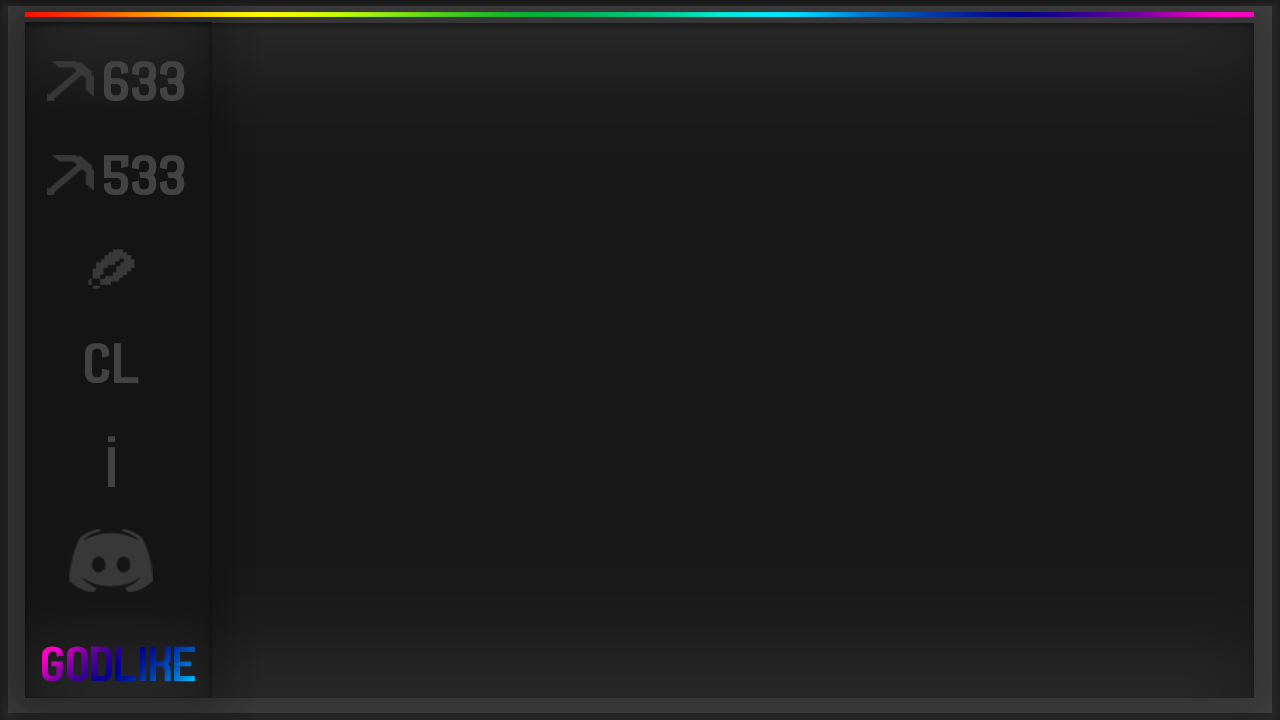
<style>
.page{position:relative;width:1280px;height:720px;background:#181818}
.page>*{position:absolute;margin:0}
.t1{font:58.3px "Septacharge";color:#424242}
.t2{font:50px "Septacharge"}
</style>
<div class="page">
<p class="t1" style="left:104px;top:61px;width:81px;height:40px">633</p>
<p class="t1" style="left:104px;top:155px;width:81px;height:40px">533</p>
<p class="t1" style="left:85px;top:343px;width:54px;height:40px">CL</p>
<p class="t1" style="left:108px;top:436px;width:7px;height:6px">.</p>
<p class="t2" style="left:42px;top:646px;width:153px;height:35px">GODLIKE</p>
</div>
